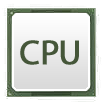
<style>
.page{position:relative;width:104px;height:105px;background:#ffffff}
.page>*{position:absolute;margin:0}
.t1{font:35px "MyriadPro-Regular";letter-spacing:-0.02em;color:#455639;font-weight:bold}
</style>
<div class="page">
<p class="t1" style="left:20px;top:40px;width:59px;height:25px">CPU</p>
</div>
